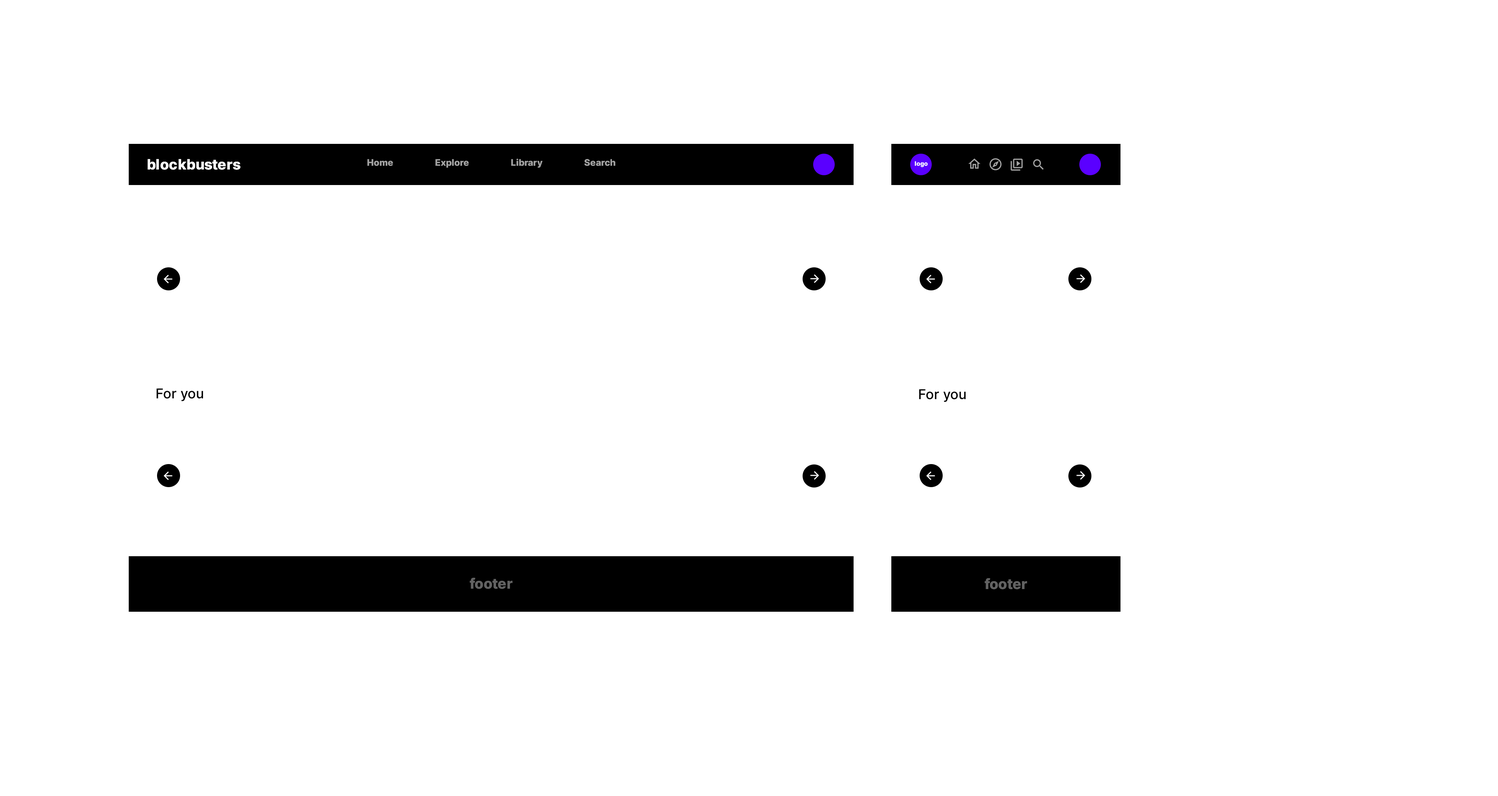
<style>
.page{position:relative;width:1498px;height:796px;background:#ffffff}
.page>*{position:absolute;margin:0}
.t1{font:14.2px "Inter-ExtraBold";color:#ffffff}
.t2{font:9.1px "Inter-ExtraBold";color:#a2a2a2}
.t3{font:6px "Inter-ExtraBold";color:#ffffff}
.t4{font:13.6px "Inter-Medium";color:#000000}
.t5{font:14.2px "Inter-ExtraBold";color:#626262}
</style>
<div class="page">
<p class="t1" style="left:148px;top:159px;width:93px;height:11px">blockbusters</p>
<p class="t2" style="left:367px;top:159px;width:248px;height:9px">Home Explore Library Search</p>
<p class="t3" style="left:915px;top:161px;width:13px;height:6px">logo</p>
<p class="t4" style="left:156px;top:388px;width:47px;height:13px">For you</p>
<p class="t4" style="left:919px;top:389px;width:47px;height:13px">For you</p>
<p class="t5" style="left:470px;top:578px;width:43px;height:11px">footer</p>
<p class="t5" style="left:985px;top:578px;width:42px;height:11px">footer</p>
</div>
